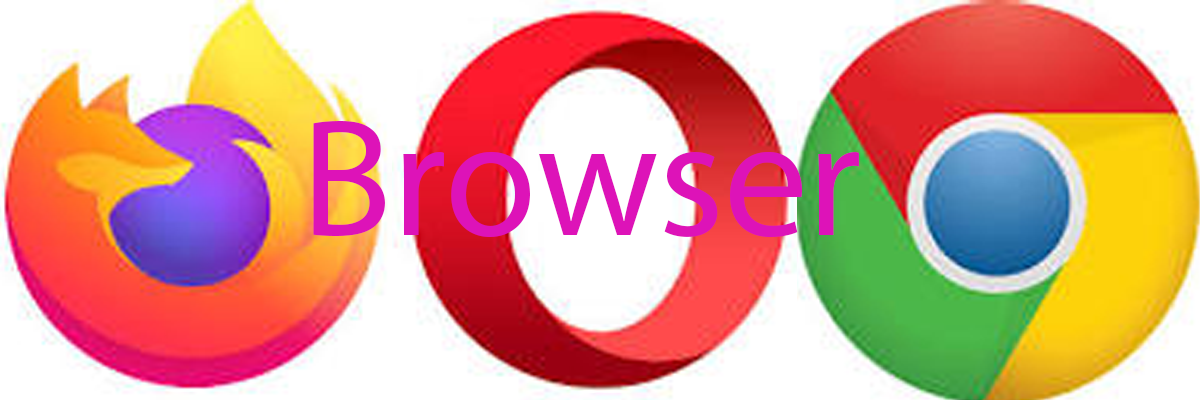
<style>
.page{position:relative;width:1200px;height:400px;background:#ffffff}
.page>*{position:absolute;margin:0}
.t1{font:167.2px "MyriadPro-Regular";color:#dd13b8}
</style>
<div class="page">
<p class="t1" style="left:313px;top:121px;width:546px;height:116px">Browser</p>
</div>
